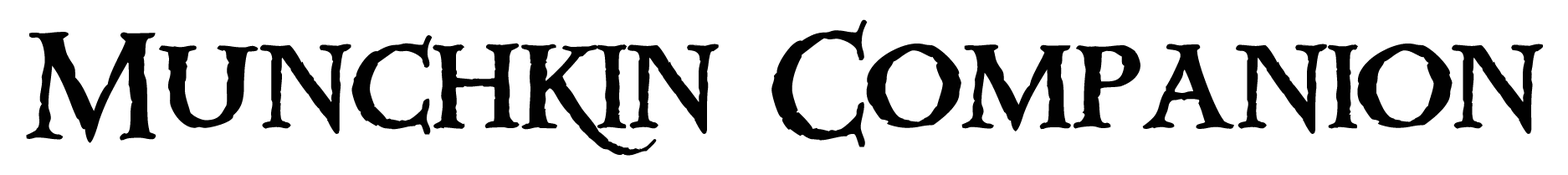
<style>
.page{position:relative;width:1568px;height:175px;background:#ffffff}
.page>*{position:absolute;margin:0}
.t1{font:133.9px "Quasimodo";color:#010101}
</style>
<div class="page">
<p class="t1" style="left:26px;top:19px;width:1517px;height:137px">Munchkin Companion</p>
</div>
